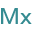
<style>
.page{position:relative;width:32px;height:32px;background:#ffffff}
.page>*{position:absolute;margin:0}
.t1{font:22px "Kalinga-Bold";color:#358b91}
</style>
<div class="page">
<p class="t1" style="left:1px;top:8px;width:31px;height:16px">Mx</p>
</div>
